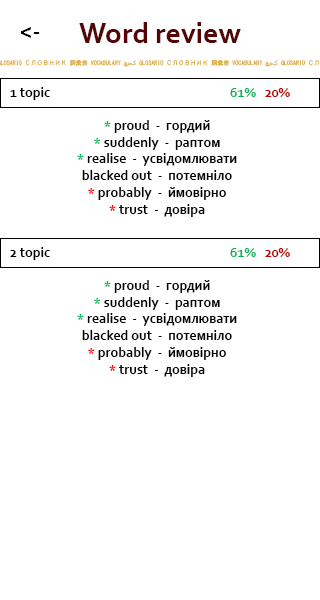
<style>
.page{position:relative;width:320px;height:600px;background:#ffffff}
.page>*{position:absolute;margin:0}
.t1{font:24px "Corbel-Bold";color:#000000}
.t2{font:30px "Corbel-Bold";color:#540606}
.t3{font:14px "Corbel-Bold";color:#000000}
.t4{font:14px "Corbel-Bold";color:#02b961}
.t5{font:14px "Corbel-Bold";color:#b90202}
.t6{font:14px "Corbel-Bold";color:#ff0000}
</style>
<div class="page">
<p class="t1" style="left:20px;top:27px;width:20px;height:11px">&lt;-</p>
<p class="t2" style="left:79px;top:22px;width:162px;height:21px">Word review</p>
<p class="t3" style="left:10px;top:87px;width:40px;height:13px">1 topic</p>
<p class="t4" style="left:230px;top:88px;width:60px;height:9px">61%   <span class="t5">20%</span></p>
<p class="t3" style="left:77px;top:120px;width:160px;height:97px;text-align:center"><span class="t4">*</span> proud  -  гордий<br><span class="t4">*</span> suddenly  -  раптом<br><span class="t4">*</span> realise  -  усвідомлювати<br>blacked out  -  потемніло<br><span class="t6">*</span> probably  -  ймовірно<br><span class="t6">*</span> trust  -  довіра</p>
<p class="t3" style="left:10px;top:247px;width:40px;height:13px">2 topic</p>
<p class="t4" style="left:230px;top:248px;width:60px;height:9px">61%   <span class="t5">20%</span></p>
<p class="t3" style="left:77px;top:280px;width:160px;height:97px;text-align:center"><span class="t4">*</span> proud  -  гордий<br><span class="t4">*</span> suddenly  -  раптом<br><span class="t4">*</span> realise  -  усвідомлювати<br>blacked out  -  потемніло<br><span class="t6">*</span> probably  -  ймовірно<br><span class="t6">*</span> trust  -  довіра</p>
</div>
